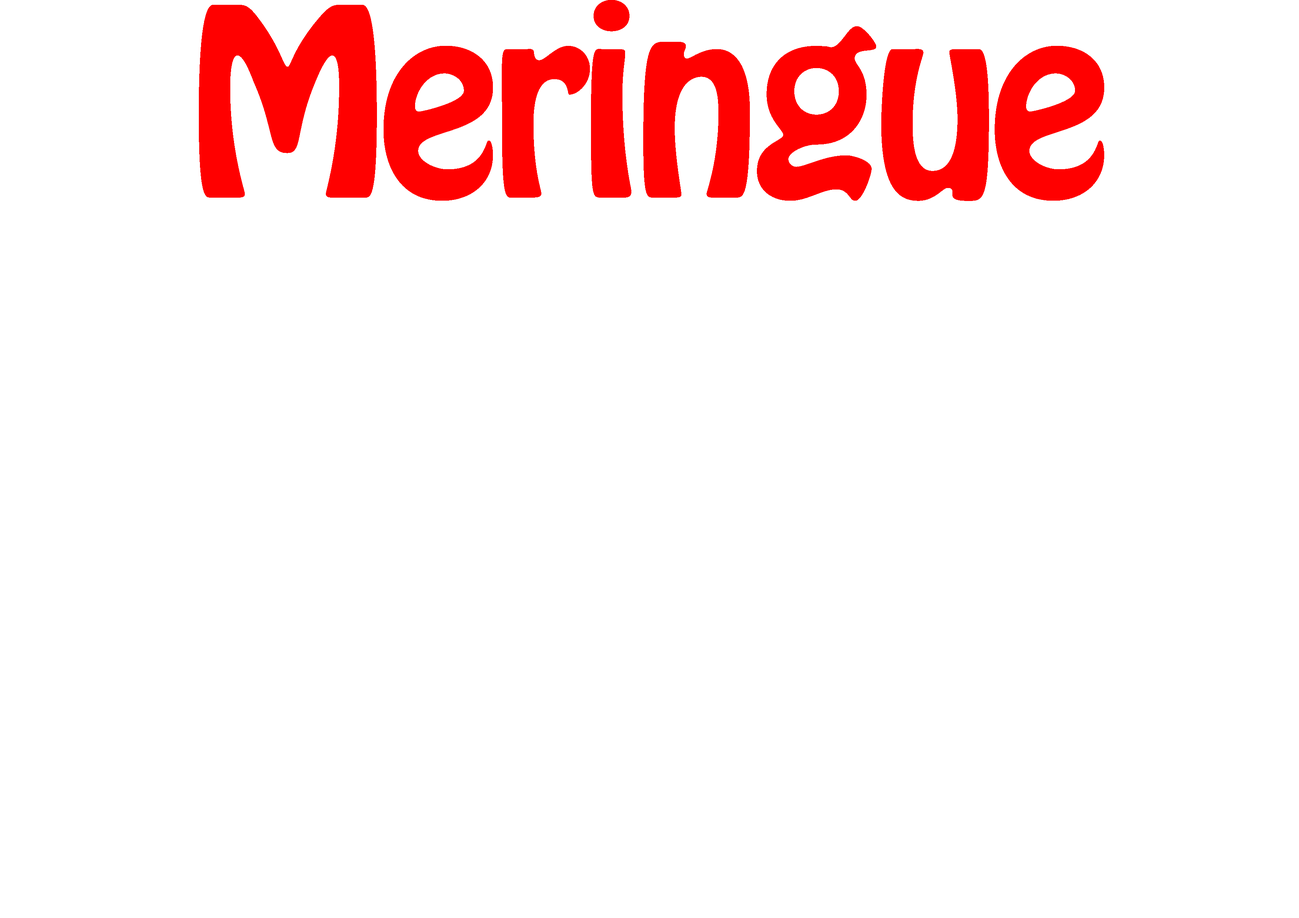
<style>
.page{position:relative;width:1299px;height:918px;background:#ffffff}
.page>*{position:absolute;margin:0}
.t1{font:231.4px "HoboStd";letter-spacing:-0.04em;color:#ff0000}
</style>
<div class="page">
<p class="t1" style="left:199px;top:0px;width:905px;height:201px">Meringue</p>
</div>
